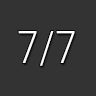
<style>
.page{position:relative;width:96px;height:96px;background:#333333}
.page>*{position:absolute;margin:0}
.t1{font:45px "RobotoCondensed-Light";color:#ffffff}
</style>
<div class="page">
<p class="t1" style="left:18px;top:31px;width:57px;height:35px">7/7</p>
</div>
